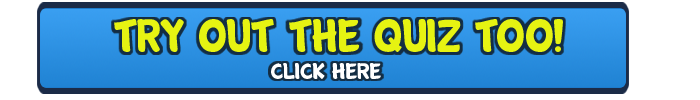
<style>
.page{position:relative;width:700px;height:100px;background:#ffffff}
.page>*{position:absolute;margin:0}
.t1{font:47px "Cartwheel";color:#e6f312}
.t2{font:22.2px "Cartwheel";color:#ffffff;scale:1.11 1}
</style>
<div class="page">
<p class="t1" style="left:114px;top:19px;width:449px;height:33px">TRY OUT THE QUIZ TOO!</p>
<p class="t2" style="left:271px;top:63px;width:110px;height:16px">CLICK HERE</p>
</div>
